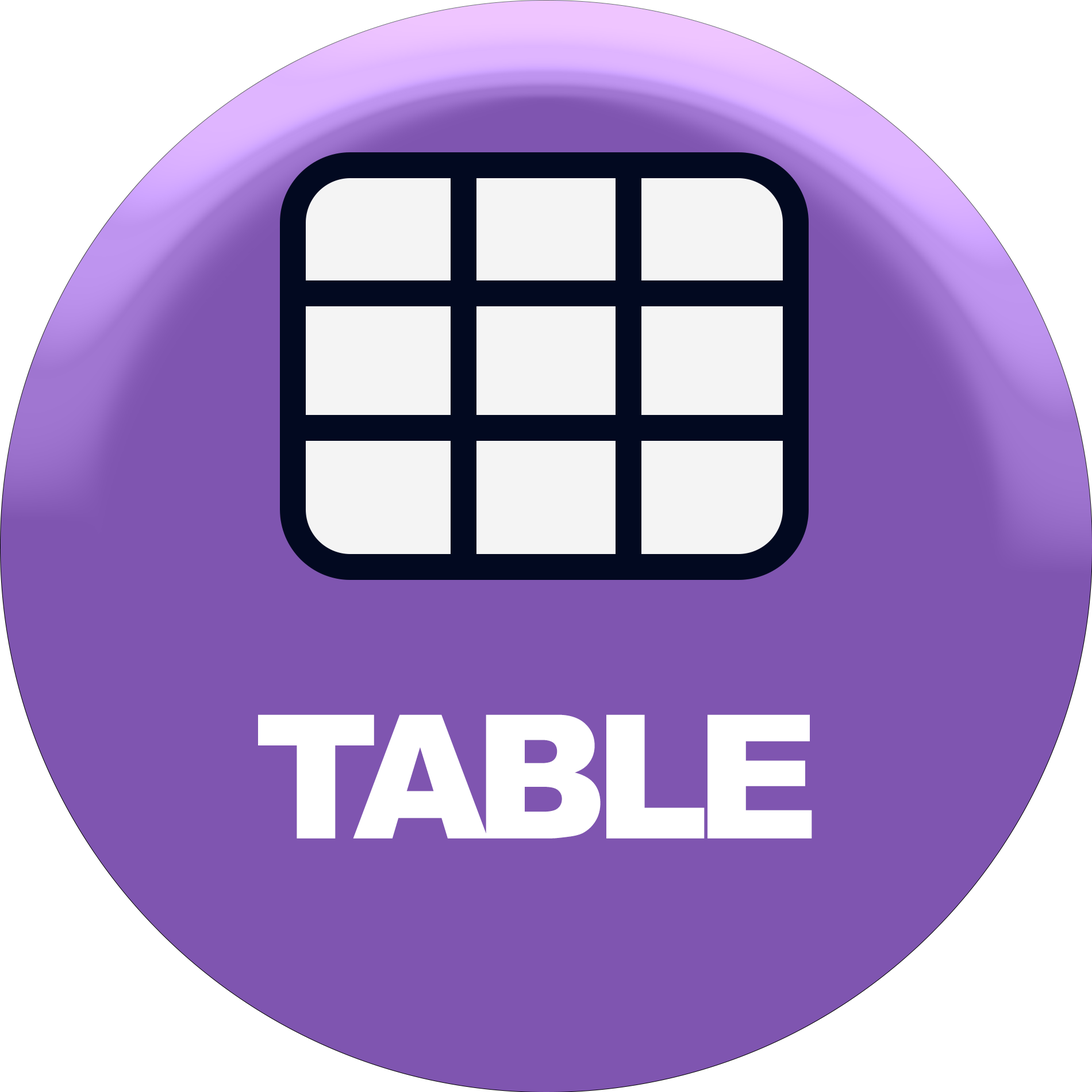
<style>
.page{position:relative;width:1092px;height:1092px;background:#7f55b0}
.page>*{position:absolute;margin:0}
.t1{font:172.4px "Arial-Black";letter-spacing:-0.08em;color:#ffffff;text-transform:uppercase}
</style>
<div class="page">
<p class="t1" style="left:258px;top:714px;width:554px;height:125px">TaBLE</p>
</div>
